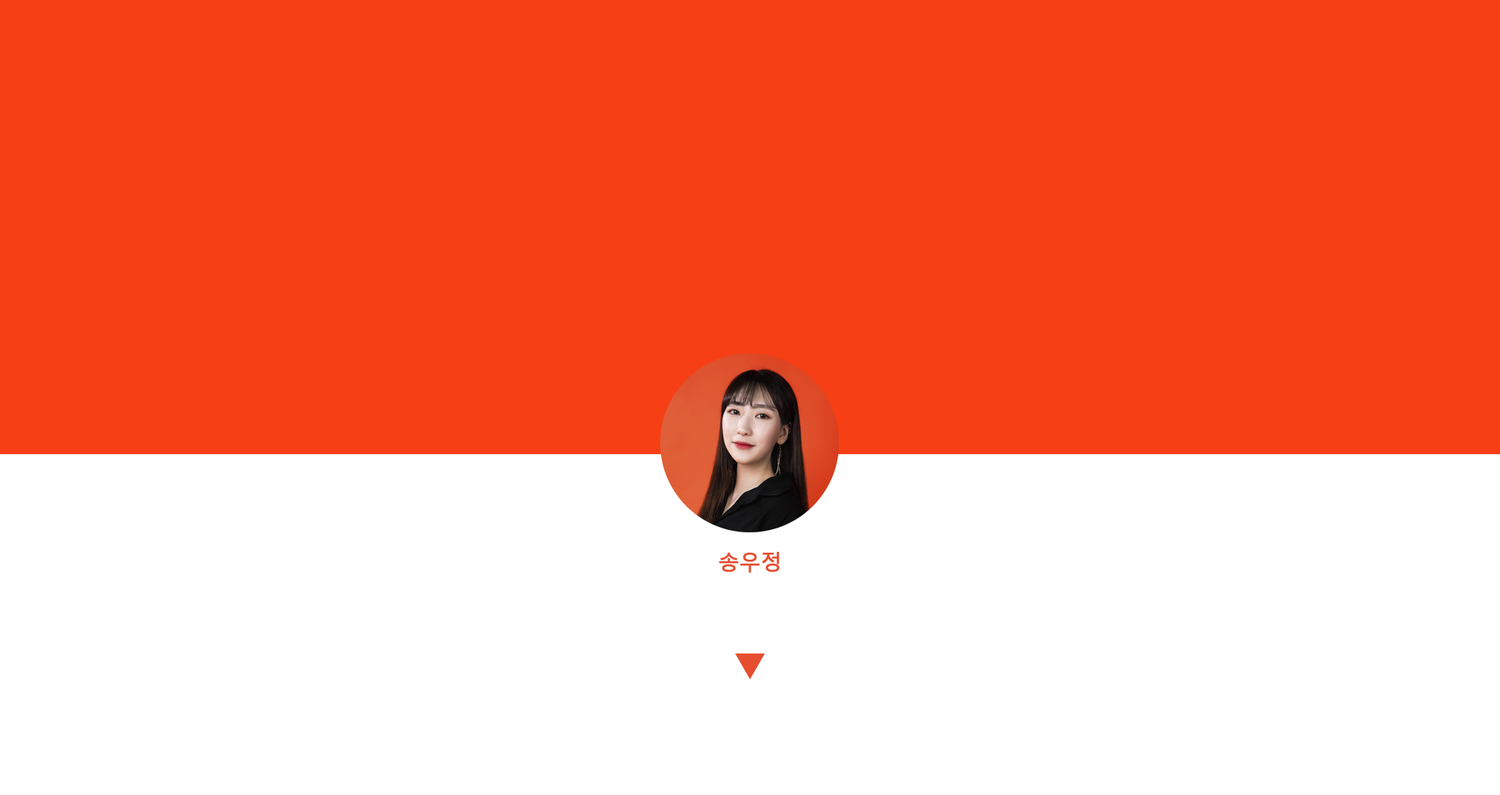
<style>
.page{position:relative;width:1500px;height:795px;background:#f63f14}
.page>*{position:absolute;margin:0}
.t1{font:20.8px "MalgunGothic";color:#e54e2f;font-weight:bold}
</style>
<div class="page">
<p class="t1" style="left:719px;top:552px;width:61px;height:21px">송우정</p>
</div>
